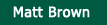
<style>
.page{position:relative;width:107px;height:25px;background:#005941}
.page>*{position:absolute;margin:0}
.t1{font:14px "Tahoma";letter-spacing:0.02em;color:#ffffff;font-weight:bold}
</style>
<div class="page">
<p class="t1" style="left:13px;top:6px;width:77px;height:12px">Matt Brown</p>
</div>
